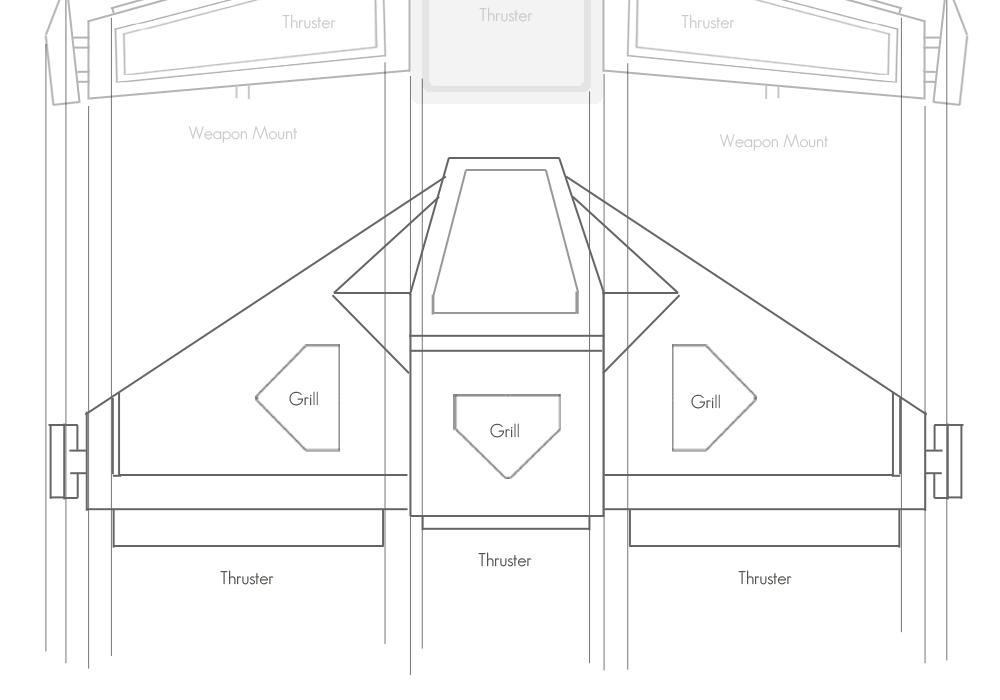
<style>
.page{position:relative;width:1000px;height:700px;background:#ffffff}
.page>*{position:absolute;margin:0}
.t1{font:18px "GeosansLight";letter-spacing:-0.005em}
.t2{font:18px "GeosansLight";letter-spacing:-0.005em;color:#4d4747}
</style>
<div class="page">
<p class="t1" style="left:289px;top:391px;width:29px;height:15px">Grill</p>
<p class="t1" style="left:691px;top:394px;width:29px;height:15px">Grill</p>
<p class="t1" style="left:490px;top:423px;width:29px;height:15px">Grill</p>
<p class="t2" style="left:478px;top:552px;width:54px;height:15px">Thruster</p>
<p class="t2" style="left:220px;top:570px;width:54px;height:15px">Thruster</p>
<p class="t2" style="left:738px;top:570px;width:54px;height:15px">Thruster</p>
</div>
